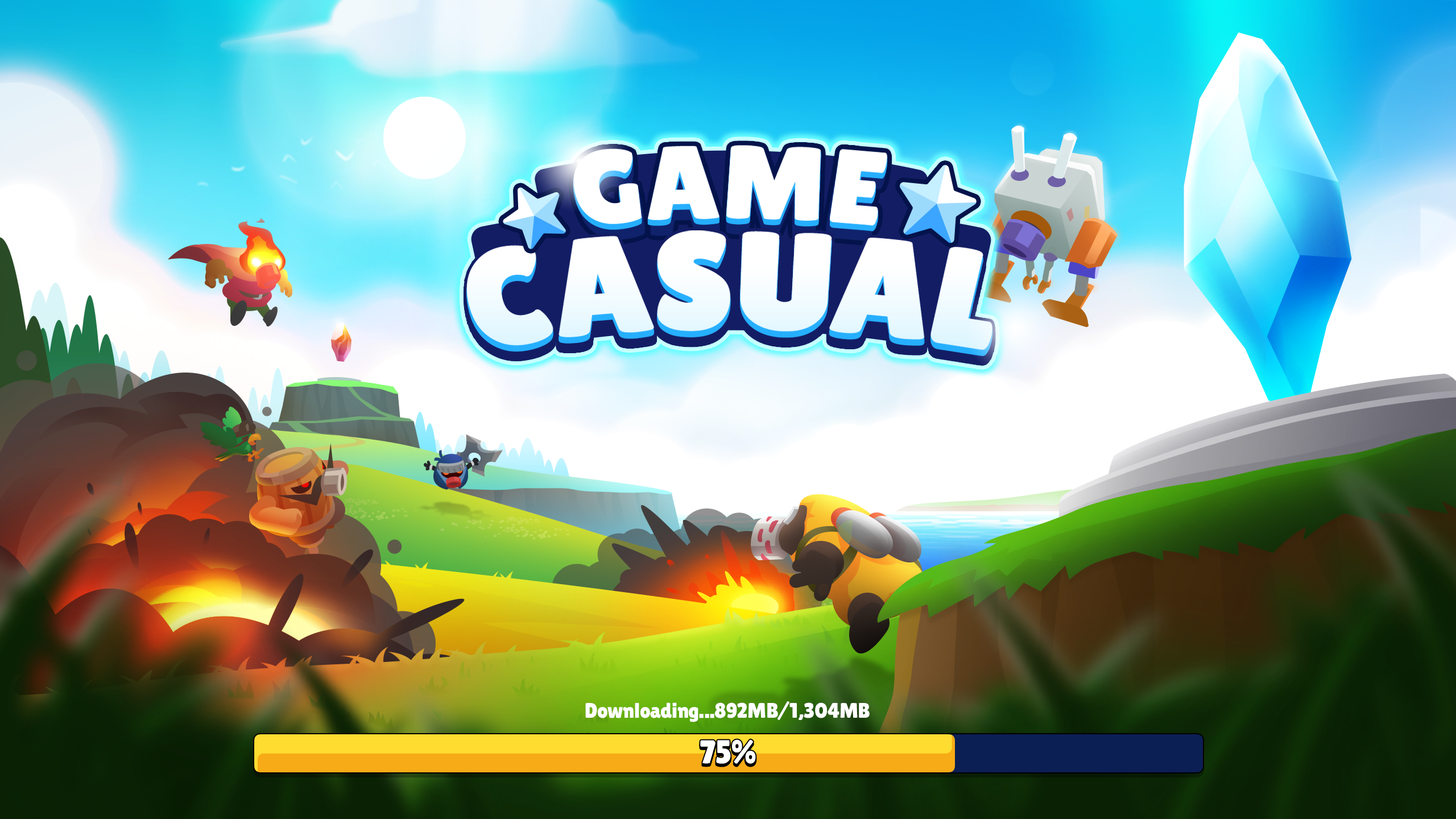
<style>
.page{position:relative;width:1456px;height:819px}
.page>*{position:absolute;margin:0}
.t1{font:21px "LilitaOne";color:#ffffff}
.t2{font:33px "LilitaOne";color:#ffffff}
</style>
<div class="page">
<p class="t1" style="left:585px;top:701px;width:285px;height:21px">Downloading...892MB/1,304MB</p>
<p class="t2" style="left:700px;top:739px;width:56px;height:25px">75%</p>
</div>
